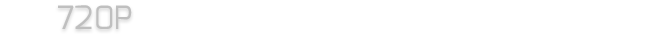
<style>
.page{position:relative;width:648px;height:35px;background:#ffffff}
.page>*{position:absolute;margin:0}
.t1{font:32px "Exo-Regular";color:#bfbfbf;text-transform:uppercase}
</style>
<div class="page">
<p class="t1" style="left:58px;top:5px;width:74px;height:24px">720p</p>
</div>
